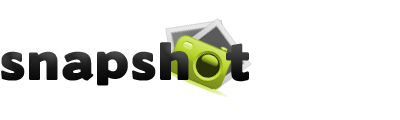
<style>
.page{position:relative;width:400px;height:120px;background:#ffffff}
.page>*{position:absolute;margin:0}
.t1{font:48px "BorisBlackBloxx";letter-spacing:0.05em;color:#1a1a1a}
.t2{font:48px "BorisBlackBloxx";letter-spacing:0.05em}
</style>
<div class="page">
<p class="t1" style="left:1px;top:42px;width:188px;height:44px">snapsh</p>
<p class="t2" style="left:226px;top:43px;width:23px;height:39px">t</p>
</div>
